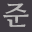
<style>
.page{position:relative;width:32px;height:32px;background:#3f3a41}
.page>*{position:absolute;margin:0}
.t1{font:27px "NanumMyeongjoBold";color:#b8b7b6}
</style>
<div class="page">
<p class="t1" style="left:3px;top:3px;width:26px;height:24px">준</p>
</div>
